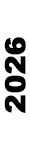
<style>
.page{position:relative;width:30px;height:150px;background:#ffffff}
.page>*{position:absolute;margin:0}
.t1{font:28px "Arial-Black";color:#000000;font-weight:bold}
</style>
<div class="page">
<p class="t1" style="left:4px;top:37px;width:22px;height:76px;rotate:-90deg">2026</p>
</div>
